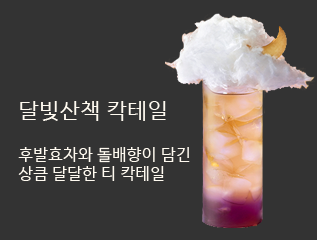
<style>
.page{position:relative;width:317px;height:240px;background:#333333}
.page>*{position:absolute;margin:0}
.t1{font:22px "HanSantteutDotumRegular";color:#fffaf0;text-transform:uppercase}
.t2{font:16px "HanSantteutDotumRegular";color:#fffaf0;text-transform:uppercase}
</style>
<div class="page">
<p class="t1" style="left:20px;top:101px;width:146px;height:20px">달빛산책 칵테일</p>
<p class="t2" style="left:18px;top:147px;width:172px;height:34px">후발효차와 돌배향이 담긴<br>상큼 달달한 티 칵테일</p>
</div>
